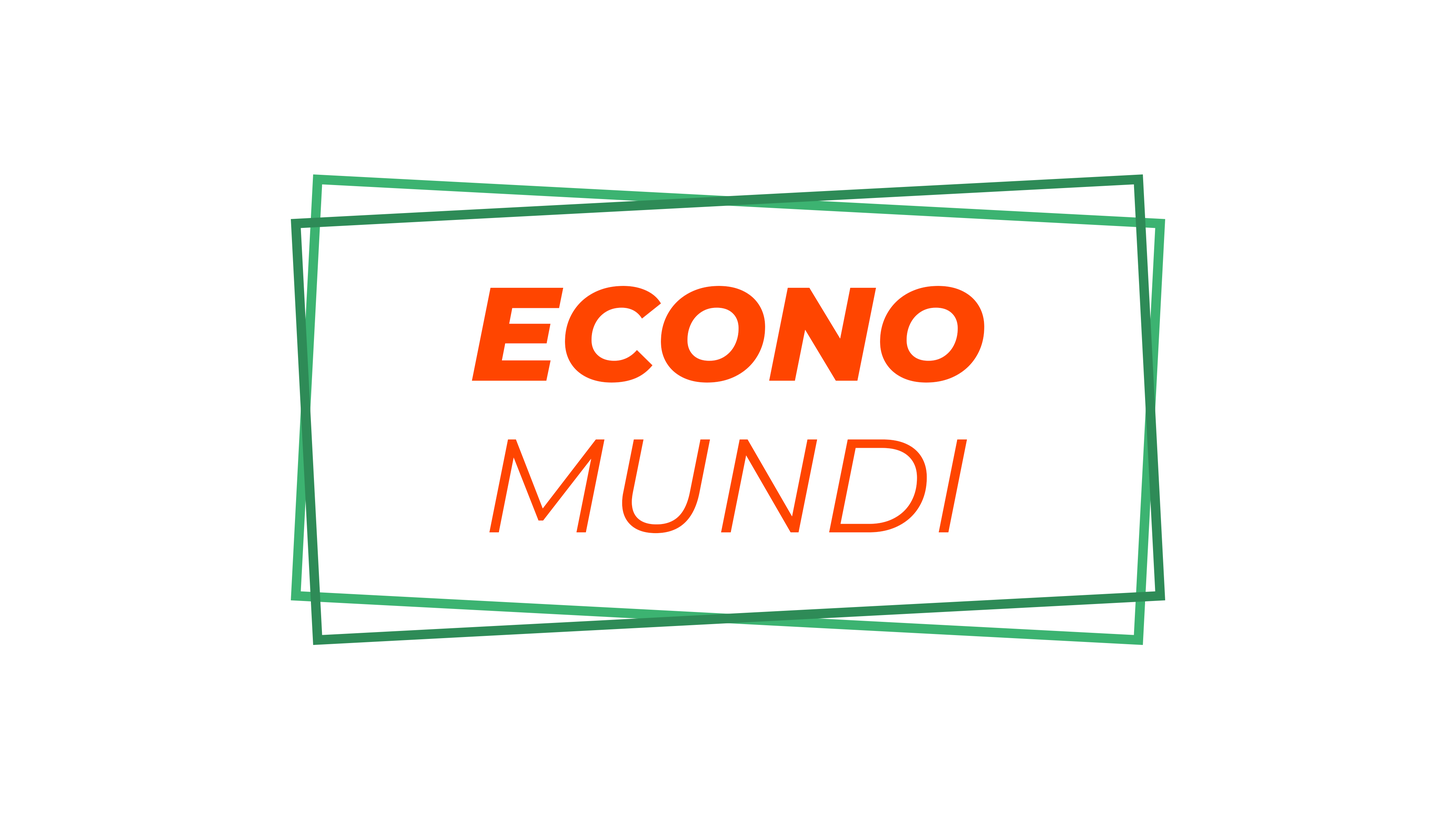
<style>
.page{position:relative;width:1456px;height:819px;background:#ffffff}
.page>*{position:absolute;margin:0}
.t1{font:132.7px "Montserrat-ExtraBoldItalic";color:#ff4500}
.t2{font:132.7px "Montserrat-Italic";color:#ff4500}
</style>
<div class="page">
<p class="t1" style="left:472px;top:286px;width:512px;height:97px">ECONO</p>
<p class="t2" style="left:489px;top:439px;width:478px;height:94px">MUNDI</p>
</div>
